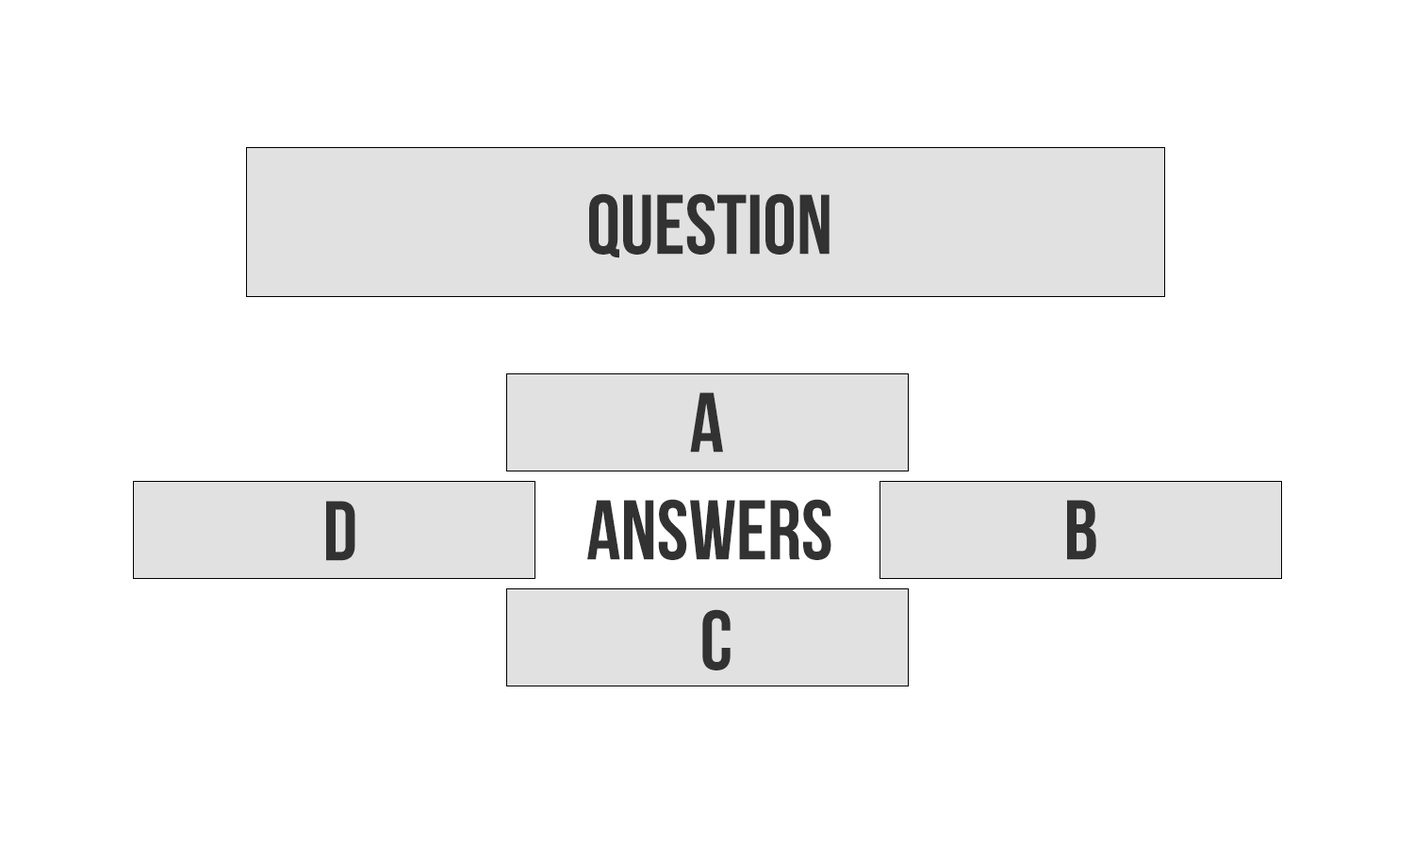
<style>
.page{position:relative;width:1414px;height:843px;background:#ffffff}
.page>*{position:absolute;margin:0}
.t1{font:84.7px "BebasNeueBold";color:#323232;text-transform:uppercase}
</style>
<div class="page">
<p class="t1" style="left:589px;top:193px;width:241px;height:65px">QUESTION</p>
<p class="t1" style="left:690px;top:392px;width:33px;height:61px">A</p>
<p class="t1" style="left:326px;top:501px;width:30px;height:60px">D</p>
<p class="t1" style="left:587px;top:499px;width:245px;height:61px">ANSWERS</p>
<p class="t1" style="left:1067px;top:500px;width:30px;height:60px">B</p>
<p class="t1" style="left:703px;top:609px;width:28px;height:61px">C</p>
</div>
